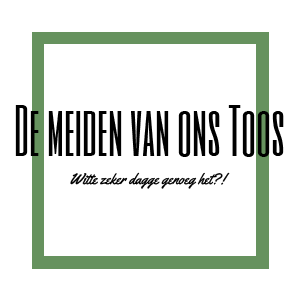
<style>
.page{position:relative;width:300px;height:300px;background:#ffffff}
.page>*{position:absolute;margin:0}
.t1{font:60px "SixCaps";color:#000000}
.t2{font:15px "Yellowtail";color:#000000}
</style>
<div class="page">
<p class="t1" style="left:15px;top:105px;width:269px;height:52px">De meiden van ons Toos</p>
<p class="t2" style="left:70px;top:172px;width:160px;height:17px">Witte zeker dagge genoeg het?!</p>
</div>
